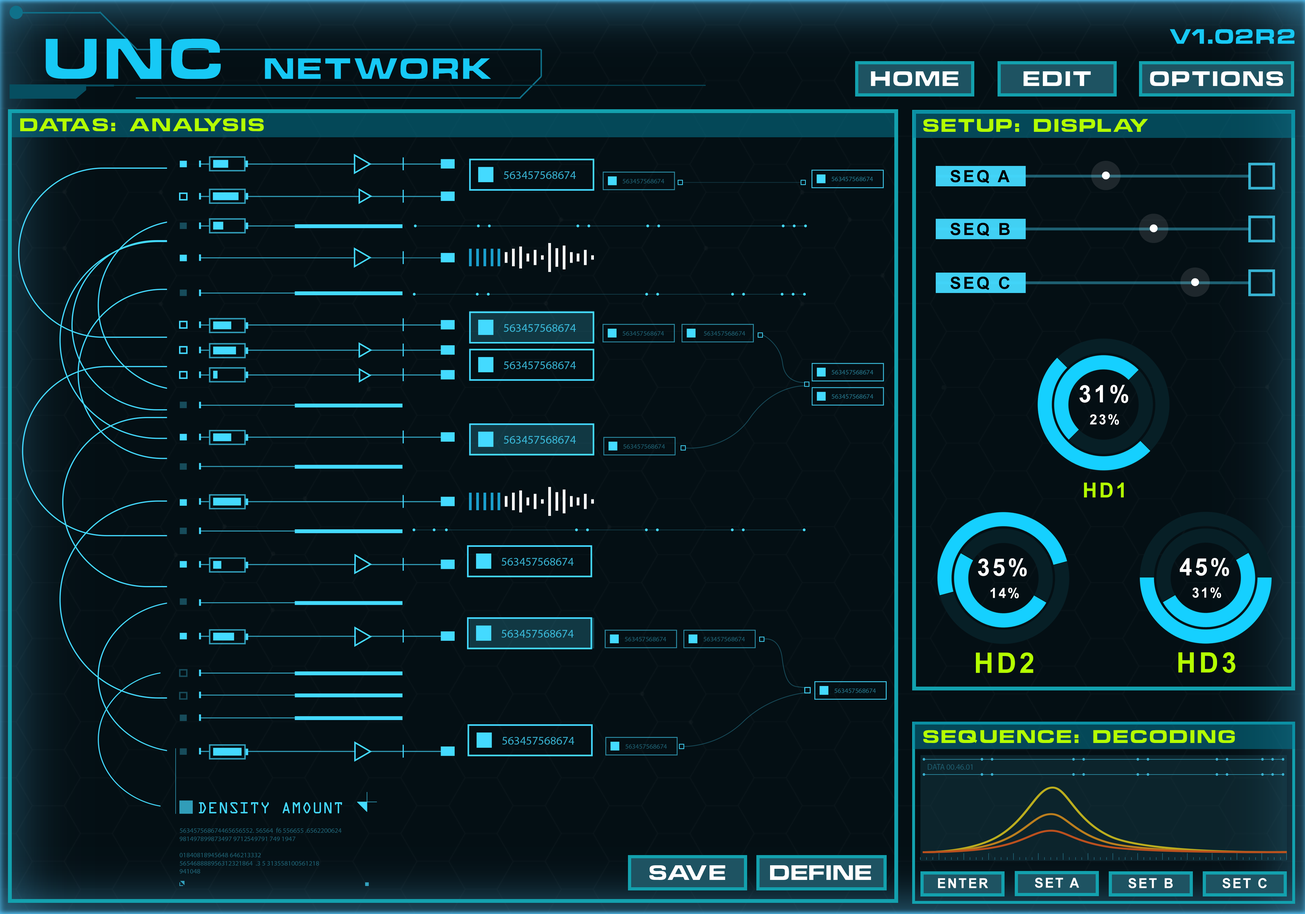
<style>
.page{position:relative;width:1305px;height:914px;background:#040f14}
.page>*{position:absolute;margin:0}
.t1{font:19.1px "ChinoCapsSSK";letter-spacing:0.12em;color:#17c9f5}
.t2{font:26.9px "ChinoCapsSSK";letter-spacing:0.12em;color:#17c9f5}
.t3{font:52.4px "ChinoCapsSSK";letter-spacing:0.12em;color:#17c9f5}
.t4{font:19.2px "ChinoCapsSSK";letter-spacing:0.12em;color:#ffffff}
.t5{font:16.8px "ChinoCapsSSK";letter-spacing:0.12em;color:#b4ff00}
.t6{font:16.8px "Arial-BoldMT";letter-spacing:0.12em;color:#000000}
.t7{font:23.9px "Arial-BoldMT";letter-spacing:0.12em;color:#ffffff;scale:0.96 1}
.t8{font:14px "Arial-BoldMT";letter-spacing:0.12em;color:#ffffff;scale:0.96 1}
.t9{font:20.7px "Arial-BoldMT";letter-spacing:0.12em;color:#b4ff00;scale:0.96 1}
.t10{font:28.2px "Arial-BoldMT";letter-spacing:0.12em;color:#b4ff00;scale:0.96 1}
.t11{font:28px "Arial-BoldMT";letter-spacing:0.12em;color:#b4ff00;scale:0.96 1}
.t12{font:19.2px "ChinoCapsSSK";letter-spacing:0.1em;color:#ffffff}
.t13{font:19.2px "ChinoCapsSSK";letter-spacing:0.06em;color:#ffffff}
.t14{font:13.6px "Arial-BoldMT";letter-spacing:0.12em;color:#ffffff}
</style>
<div class="page">
<p class="t1" style="left:1169px;top:29px;width:125px;height:15px">V1.02R2</p>
<p class="t2" style="left:46px;top:39px;width:445px;height:40px"><span class="t3">UNC </span>NETWORK</p>
<p class="t4" style="left:870px;top:71px;width:88px;height:15px">HOME</p>
<p class="t4" style="left:1023px;top:71px;width:68px;height:15px">EDIT</p>
<p class="t4" style="left:1149px;top:71px;width:134px;height:15px">OPTIONS</p>
<p class="t5" style="left:20px;top:118px;width:244px;height:13px">DATAS: ANALYSIS</p>
<p class="t5" style="left:923px;top:119px;width:225px;height:13px">SETUP: DISPLAY</p>
<p class="t6" style="left:950px;top:170px;width:59px;height:13px">SEQ A</p>
<p class="t6" style="left:950px;top:223px;width:59px;height:13px">SEQ B</p>
<p class="t6" style="left:950px;top:276px;width:59px;height:14px">SEQ C</p>
<p class="t7" style="left:1079px;top:385px;width:49px;height:18px">31%</p>
<p class="t8" style="left:1090px;top:414px;width:29px;height:11px">23%</p>
<p class="t9" style="left:1084px;top:483px;width:39px;height:14px">HD1</p>
<p class="t7" style="left:1179px;top:558px;width:50px;height:18px">45%</p>
<p class="t7" style="left:977px;top:558px;width:49px;height:18px">35%</p>
<p class="t8" style="left:990px;top:588px;width:29px;height:10px">14%</p>
<p class="t8" style="left:1192px;top:587px;width:29px;height:11px">31%</p>
<p class="t10" style="left:976px;top:652px;width:57px;height:21px">HD2</p>
<p class="t11" style="left:1178px;top:652px;width:57px;height:21px">HD3</p>
<p class="t5" style="left:923px;top:730px;width:311px;height:13px">SEQUENCE: DECODING</p>
<p class="t12" style="left:649px;top:865px;width:76px;height:15px">SAVE</p>
<p class="t13" style="left:770px;top:865px;width:101px;height:15px">DEFINE</p>
<p class="t14" style="left:938px;top:878px;width:50px;height:10px">ENTER</p>
<p class="t14" style="left:1034px;top:878px;width:45px;height:10px">SET A</p>
<p class="t14" style="left:1128px;top:878px;width:44px;height:10px">SET B</p>
<p class="t14" style="left:1222px;top:878px;width:44px;height:10px">SET C</p>
</div>
